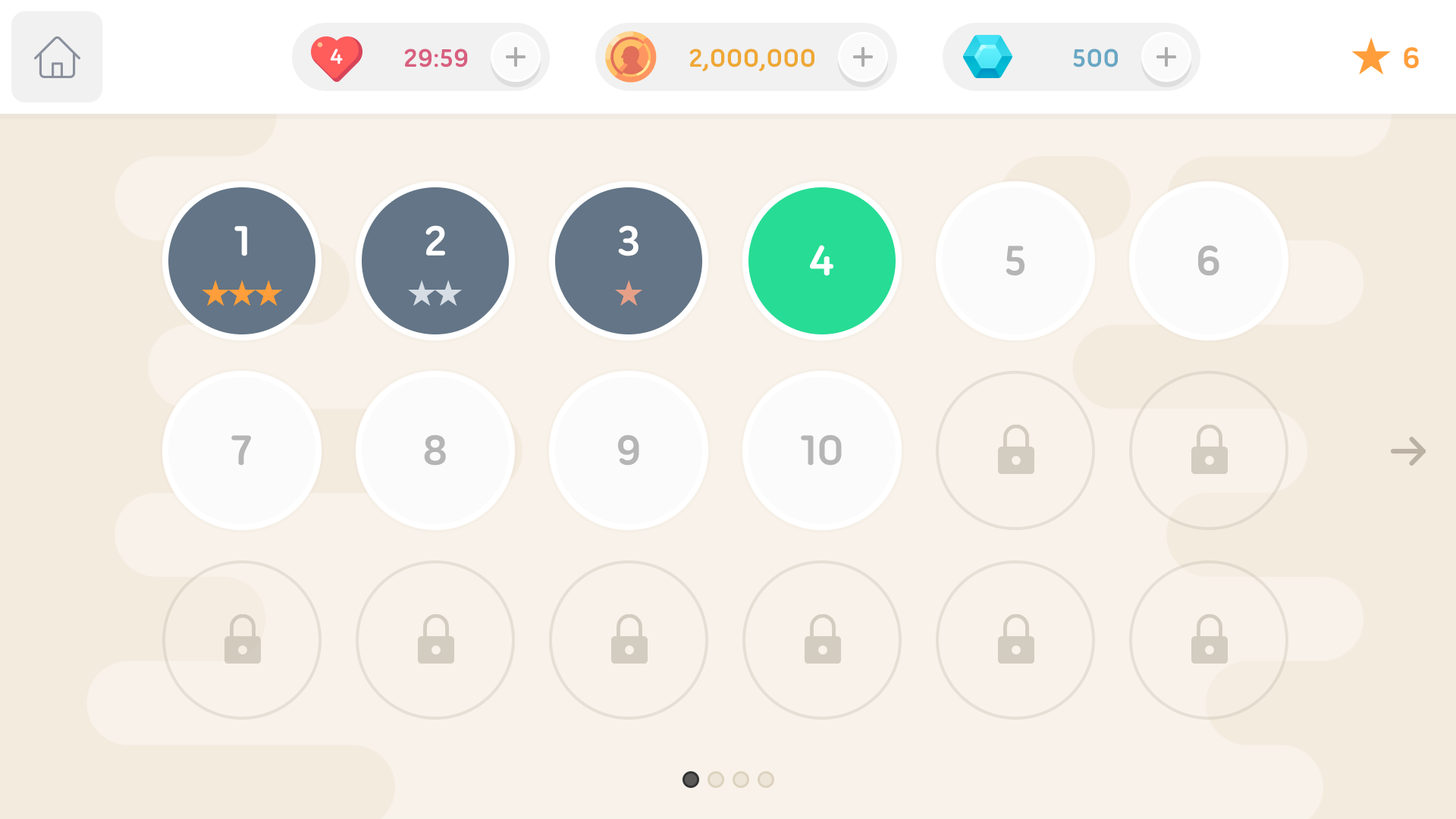
<style>
.page{position:relative;width:1456px;height:819px;background:#f8f2ea}
.page>*{position:absolute;margin:0}
.t1{font:22.7px "UbuntuTitling-Bold";color:#ffffff;text-transform:uppercase}
.t2{font:27.3px "UbuntuTitling-Bold";color:#d85f7f;text-transform:uppercase}
.t3{font:27.3px "UbuntuTitling-Bold";color:#eea835;text-transform:uppercase}
.t4{font:27.3px "UbuntuTitling-Bold";color:#69a7c4;text-transform:uppercase}
.t5{font:31.8px "UbuntuTitling-Bold";color:#ff9e3a}
.t6{font:45.5px "UbuntuTitling-Bold";color:#ffffff}
.t7{font:45.5px "UbuntuTitling-Bold";color:#b5b5b5}
</style>
<div class="page">
<p class="t1" style="left:330px;top:49px;width:13px;height:15px">4</p>
<p class="t2" style="left:404px;top:49px;width:64px;height:18px">29:59</p>
<p class="t3" style="left:689px;top:49px;width:125px;height:22px">2,000,000</p>
<p class="t4" style="left:1073px;top:49px;width:45px;height:18px">500</p>
<p class="t5" style="left:1404px;top:47px;width:15px;height:21px">6</p>
<p class="t6" style="left:234px;top:226px;width:13px;height:30px">1</p>
<p class="t6" style="left:425px;top:225px;width:20px;height:31px">2</p>
<p class="t6" style="left:618px;top:225px;width:21px;height:31px">3</p>
<p class="t6" style="left:810px;top:245px;width:23px;height:31px">4</p>
<p class="t7" style="left:1006px;top:246px;width:18px;height:30px">5</p>
<p class="t7" style="left:1198px;top:245px;width:21px;height:31px">6</p>
<p class="t7" style="left:231px;top:435px;width:20px;height:31px">7</p>
<p class="t7" style="left:424px;top:435px;width:22px;height:31px">8</p>
<p class="t7" style="left:618px;top:435px;width:21px;height:31px">9</p>
<p class="t7" style="left:801px;top:435px;width:41px;height:31px">10</p>
</div>
